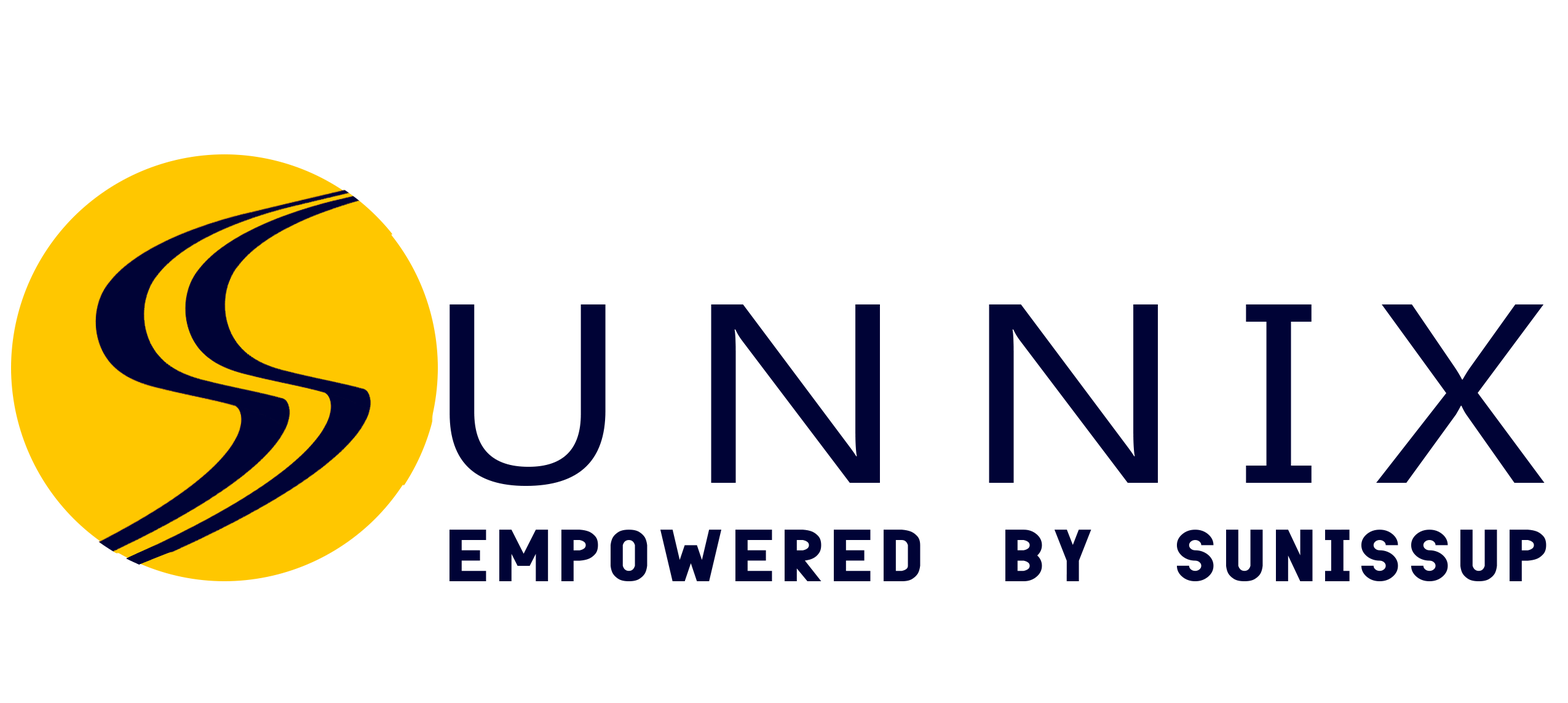
<style>
.page{position:relative;width:1568px;height:703px;background:#ffffff}
.page>*{position:absolute;margin:0}
.t1{font:254.4px "MicrosoftNewTaiLue";letter-spacing:0.18em;color:#000336;scale:1.18 1}
.t2{font:52.1px "Menoreh-Regular";letter-spacing:0.18em;color:#000336;scale:1.18 1}
</style>
<div class="page">
<p class="t1" style="left:449px;top:304px;width:1096px;height:182px">UNNIX</p>
<p class="t2" style="left:449px;top:529px;width:1097px;height:52px">EMPOWERED BY SUNISSUP</p>
</div>
